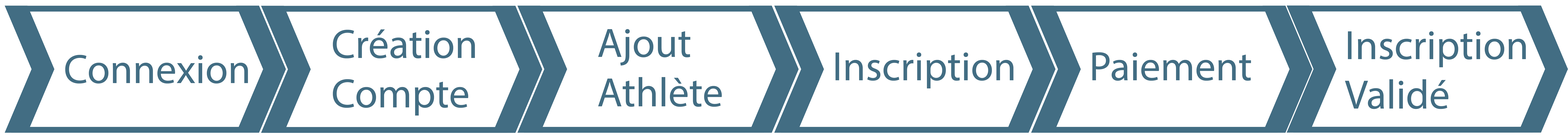
<style>
.page{position:relative;width:1568px;height:138px;background:#ffffff}
.page>*{position:absolute;margin:0}
.t1{font:41.3px "MyriadPro-Regular";color:#426d83}
</style>
<div class="page">
<p class="t1" style="left:333px;top:29px;width:142px;height:87px">Création <br>Compte</p>
<p class="t1" style="left:598px;top:29px;width:124px;height:78px">Ajout<br>Athlète</p>
<p class="t1" style="left:1345px;top:31px;width:181px;height:78px">Inscription<br>Validé</p>
<p class="t1" style="left:835px;top:52px;width:178px;height:37px">Inscription</p>
<p class="t1" style="left:1092px;top:52px;width:159px;height:29px">Paiement</p>
<p class="t1" style="left:65px;top:55px;width:183px;height:29px">Connexion</p>
</div>
